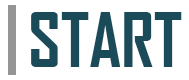
<style>
.page{position:relative;width:189px;height:80px;background:#ffffff}
.page>*{position:absolute;margin:0}
.t1{font:72px "AgencyFB-Bold";color:#1b4a59}
</style>
<div class="page">
<p class="t1" style="left:31px;top:12px;width:151px;height:55px">START</p>
</div>
